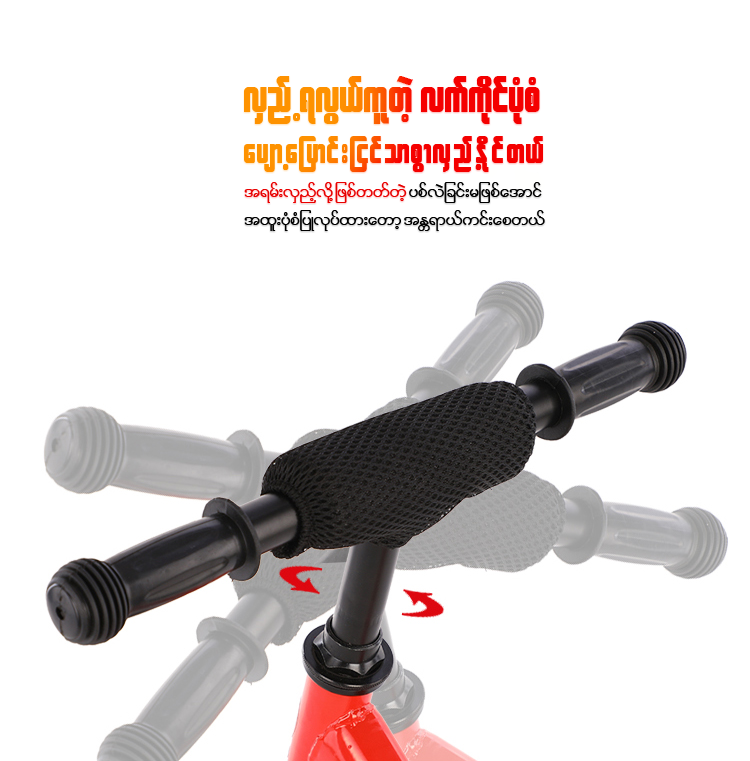
<style>
.page{position:relative;width:750px;height:761px;background:#ffffff}
.page>*{position:absolute;margin:0}
.t1{font:48px "W30ArtHouse"}
.t2{font:36.3px "W30ArtHouse";letter-spacing:0.035em}
.t3{font:23.2px/28.3px "W01ArtHouseWin";color:#000000}
</style>
<div class="page">
<p class="t1" style="left:244px;top:76px;width:296px;height:48px">vSnfU &amp;vG,fulwJh vufudkifyHkpH</p>
<p class="t2" style="left:244px;top:136px;width:299px;height:36px">aysmYajymif;jiifompGmvSnfUEdkifw,f</p>
<p class="t3" style="left:244px;top:182px;width:301px;height:49px">t&amp;rf;vSnfhvdkY jzpfwwfwJh ypfvJjcif;rjzpfatmif<br>txl;yHkpHjyKvkyfxm;awmh tEÅ&amp;m,fuif;apw,f</p>
</div>
